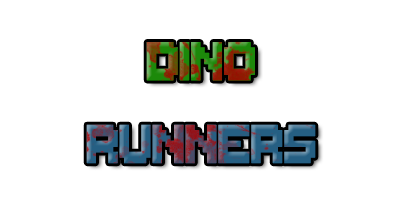
<style>
.page{position:relative;width:400px;height:200px;background:#ffffff}
.page>*{position:absolute;margin:0}
.t1{font:86.2px "ThaleahFat";letter-spacing:-0.05em;font-weight:bold;scale:0.8 1}
</style>
<div class="page">
<p class="t1" style="left:86px;top:42px;width:230px;height:122px;text-align:center">Dino<br>Runners</p>
</div>
